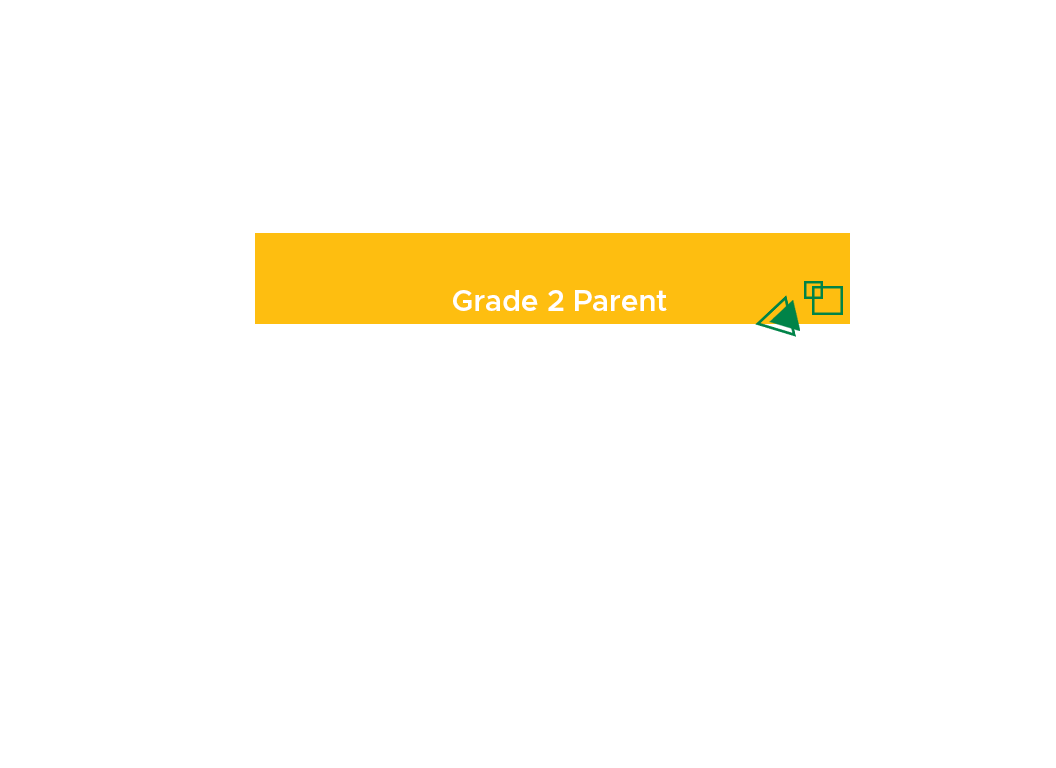
<style>
.page{position:relative;width:1056px;height:768px;background:#ffffff}
.page>*{position:absolute;margin:0}
.t1{font:29.3px "Metropolis-SemiBold";color:#ffffff}
</style>
<div class="page">
<p class="t1" style="left:453px;top:290px;width:214px;height:21px">Grade 2 Parent</p>
</div>
